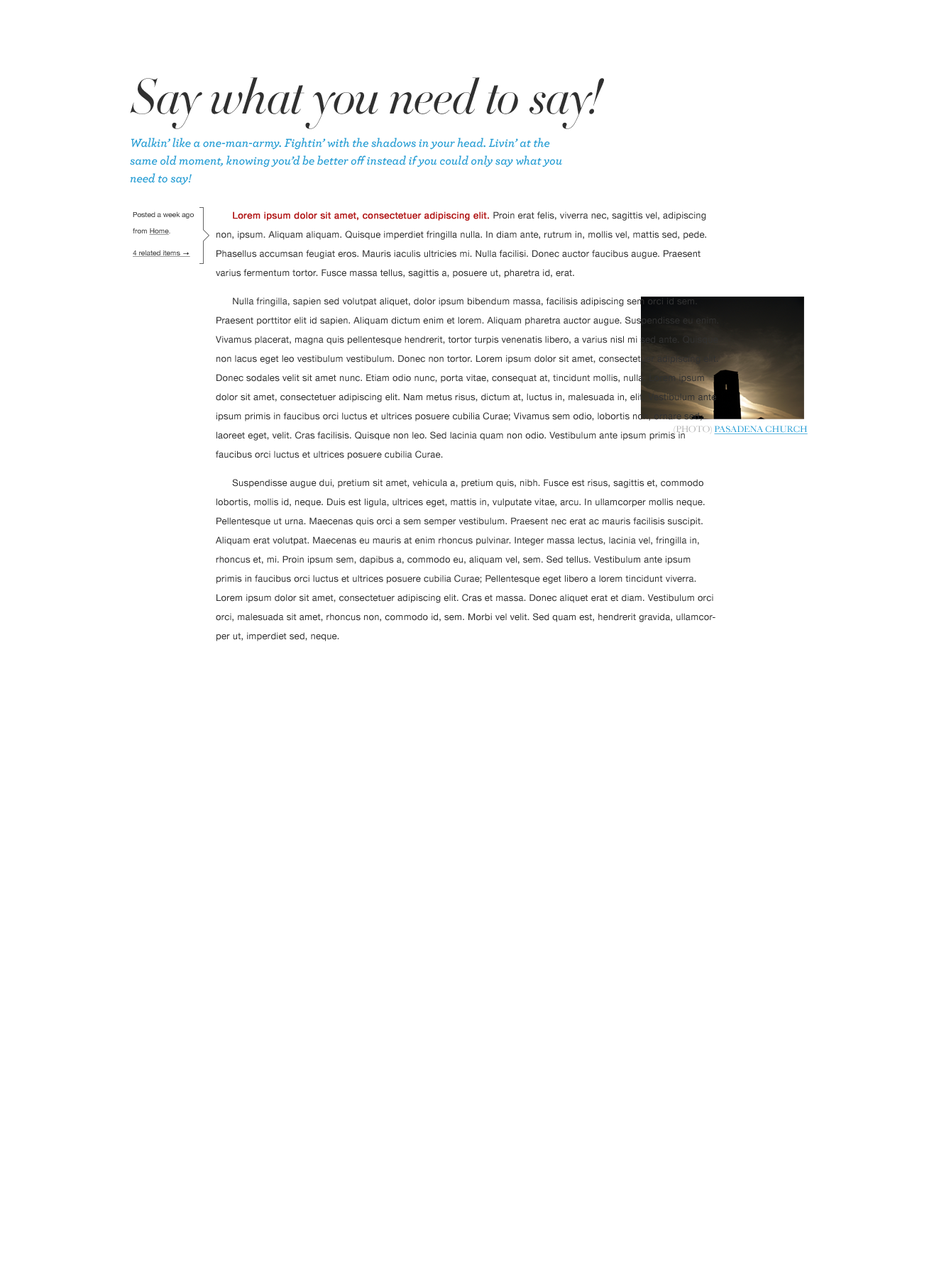
<style>
.page{position:relative;width:934px;height:1277px;background:#ffffff}
.page>*{position:absolute;margin:0}
.t1{font:48.8px "HTFDidot-L42LightItalic";color:#303030}
.t2{font:12.1px/17.7px "Archer-SemiboldItalic";color:#229bd3}
.t3{font:7.1px/16.3px "HelveticaNeue";color:#303030}
.t4{font:7.1px/16.3px "HelveticaNeue";color:#303030;text-decoration:underline}
.t5{font:7.1px/22px "HelveticaNeue";color:#303030;text-decoration:underline}
.t6{font:9.2px/19.2px "HelveticaNeue";letter-spacing:0.02em;color:#303030}
.t7{font:9.2px/19.2px "HelveticaNeue";letter-spacing:0.02em;color:#b11515}
.t8{font:9.2px/19.2px "HelveticaNeue";letter-spacing:0.02em;color:#b11515;font-weight:bold}
.t9{font:9.2px "Baskerville";color:#229bd3;text-transform:uppercase;text-decoration:underline}
.t10{font:9.2px "Baskerville";color:#afafaf;text-transform:uppercase}
</style>
<div class="page">
<p class="t1" style="left:130px;top:77px;width:474px;height:52px">Say what you need to say!</p>
<p class="t2" style="left:130px;top:138px;width:432px;height:47px">Walkin’ like a one-man-army. Fightin’ with the shadows in your head. Livin’ at the same old moment, knowing you’d be better off instead if you could only say what you need to say!</p>
<p class="t3" style="left:133px;top:211px;width:61px;height:46px">Posted a week ago<br>from <span class="t4">Home</span>.<br><span class="t5">4 related items</span></p>
<p class="t6" style="left:216px;top:211px;width:502px;height:430px"><span class="t7">      </span><span class="t8">Lorem ipsum dolor sit amet, consectetuer adipiscing elit. </span>Proin erat felis, viverra nec, sagittis vel, adipiscing non, ipsum. Aliquam aliquam. Quisque imperdiet fringilla nulla. In diam ante, rutrum in, mollis vel, mattis sed, pede. Phasellus accumsan feugiat eros. Mauris iaculis ultricies mi. Nulla facilisi. Donec auctor faucibus augue. Praesent varius fermentum tortor. Fusce massa tellus, sagittis a, posuere ut, pharetra id, erat.<br>      Nulla fringilla, sapien sed volutpat aliquet, dolor ipsum bibendum massa, facilisis adipiscing sem orci id sem. Praesent porttitor elit id sapien. Aliquam dictum enim et lorem. Aliquam pharetra auctor augue. Suspendisse eu enim. Vivamus placerat, magna quis pellentesque hendrerit, tortor turpis venenatis libero, a varius nisl mi sed ante. Quisque non lacus eget leo vestibulum vestibulum. Donec non tortor. Lorem ipsum dolor sit amet, consectetuer adipiscing elit. Donec sodales velit sit amet nunc. Etiam odio nunc, porta vitae, consequat at, tincidunt mollis, nulla. Lorem ipsum dolor sit amet, consectetuer adipiscing elit. Nam metus risus, dictum at, luctus in, malesuada in, elit. Vestibulum ante ipsum primis in faucibus orci luctus et ultrices posuere cubilia Curae; Vivamus sem odio, lobortis non, ornare sed, laoreet eget, velit. Cras facilisis. Quisque non leo. Sed lacinia quam non odio. Vestibulum ante ipsum primis in faucibus orci luctus et ultrices posuere cubilia Curae.<br>      Suspendisse augue dui, pretium sit amet, vehicula a, pretium quis, nibh. Fusce est risus, sagittis et, commodo lobortis, mollis id, neque. Duis est ligula, ultrices eget, mattis in, vulputate vitae, arcu. In ullamcorper mollis neque. Pellentesque ut urna. Maecenas quis orci a sem semper vestibulum. Praesent nec erat ac mauris facilisis suscipit. Aliquam erat volutpat. Maecenas eu mauris at enim rhoncus pulvinar. Integer massa lectus, lacinia vel, fringilla in, rhoncus et, mi. Proin ipsum sem, dapibus a, commodo eu, aliquam vel, sem. Sed tellus. Vestibulum ante ipsum primis in faucibus orci luctus et ultrices posuere cubilia Curae; Pellentesque eget libero a lorem tincidunt viverra. Lorem ipsum dolor sit amet, consectetuer adipiscing elit. Cras et massa. Donec aliquet erat et diam. Vestibulum orci orci, malesuada sit amet, rhoncus non, commodo id, sem. Morbi vel velit. Sed quam est, hendrerit gravida, ullamcorper ut, imperdiet sed, neque.</p>
<p class="t9" style="left:673px;top:426px;width:134px;height:8px"><span class="t10">(Photo) </span>Pasadena Church</p>
</div>
